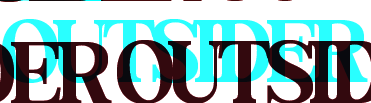
<style>
.page{position:relative;width:371px;height:103px;background:#ffffff}
.page>*{position:absolute;margin:0}
.t1{font:108px "Roklin-Regular";letter-spacing:-0.05em;scale:0.93 1}
</style>
<div class="page">
<p class="t1" style="left:2px;top:19px;width:366px;height:64px">OUTSIDER</p>
</div>
